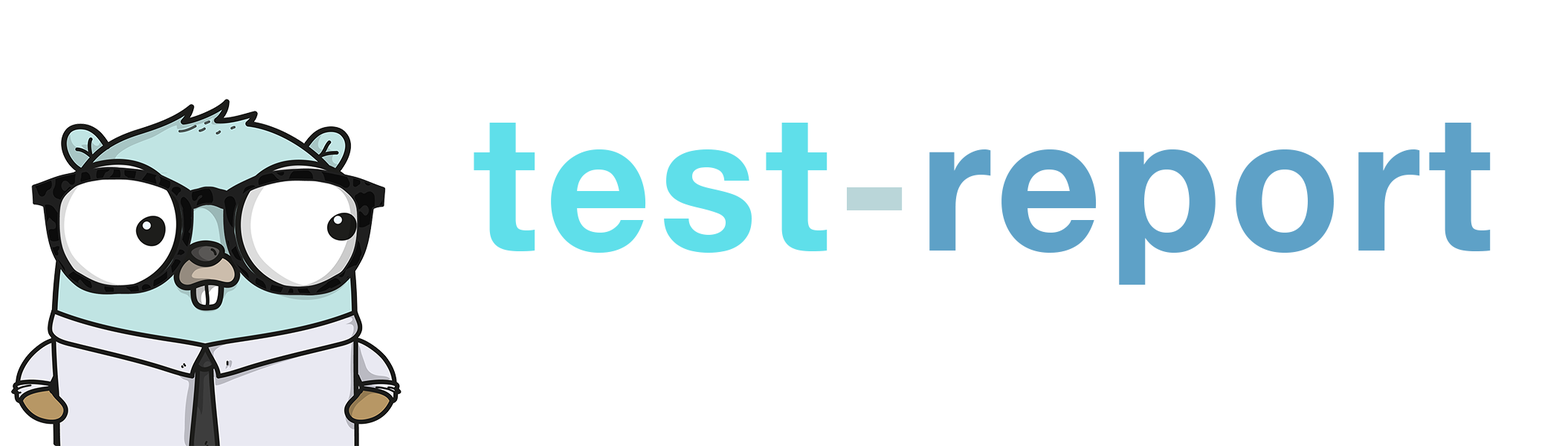
<style>
.page{position:relative;width:1568px;height:446px;background:#ffffff}
.page>*{position:absolute;margin:0}
.t1{font:190.3px "HelveticaNeue-Bold";letter-spacing:0.045em;color:#5ea1c7;scale:0.96 1}
.t2{font:190.3px "HelveticaNeue-Bold";letter-spacing:0.045em;color:#5fdfea;scale:0.96 1}
.t3{font:190.3px "HelveticaNeue-Bold";letter-spacing:0.045em;color:#bad6d9;scale:0.96 1}
</style>
<div class="page">
<p class="t1" style="left:474px;top:123px;width:1017px;height:162px"><span class="t2">test</span><span class="t3">-</span>report</p>
</div>
